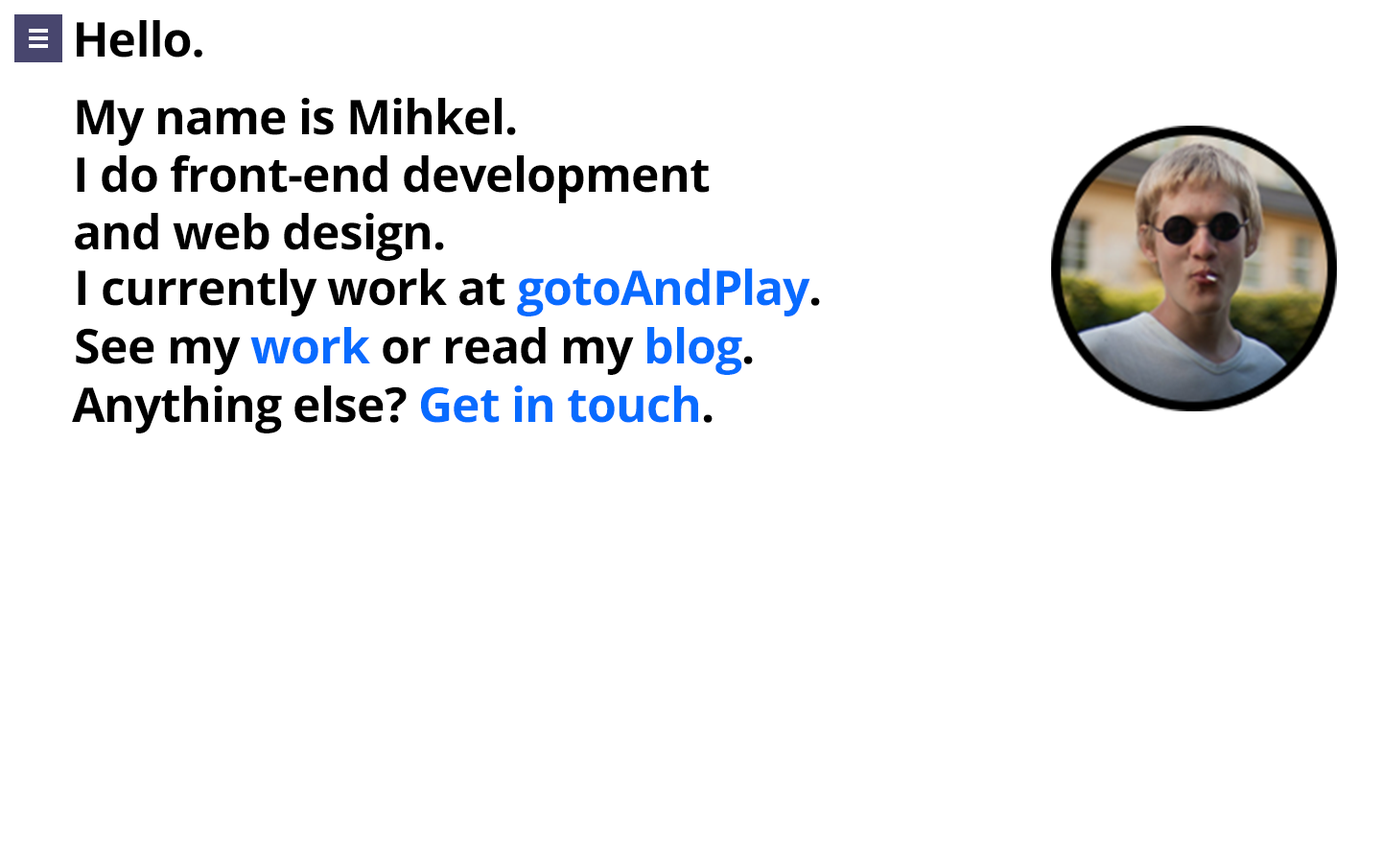
<style>
.page{position:relative;width:1381px;height:863px;background:#ffffff}
.page>*{position:absolute;margin:0}
.t1{font:48px "OpenSans-Bold";letter-spacing:-0.02em;color:#000000}
.t2{font:48px/57.6px "OpenSans-Bold";letter-spacing:-0.02em;color:#000000}
.t3{font:48px "OpenSans-Bold";letter-spacing:-0.02em;color:#086bff}
</style>
<div class="page">
<p class="t1" style="left:77px;top:20px;width:125px;height:38px">Hello.</p>
<p class="t2" style="left:75px;top:98px;width:635px;height:163px">My name is Mihkel. <br>I do front-end development <br>and web design.</p>
<p class="t1" style="left:78px;top:269px;width:742px;height:48px">I currently work at <span class="t3">gotoAndPlay</span>.</p>
<p class="t1" style="left:76px;top:327px;width:677px;height:48px">See my <span class="t3">work </span>or read my <span class="t3">blog</span>.</p>
<p class="t1" style="left:72px;top:386px;width:641px;height:48px">Anything else? <span class="t3">Get in touch</span>.</p>
</div>
